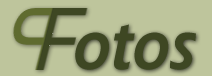
<style>
.page{position:relative;width:212px;height:76px;background:#bec59c}
.page>*{position:absolute;margin:0}
.t1{font:72px "ErasITC-Demi";color:#3e4723;font-style:italic;scale:0.83 1}
</style>
<div class="page">
<p class="t1" style="left:75px;top:24px;width:121px;height:46px">otos</p>
</div>
